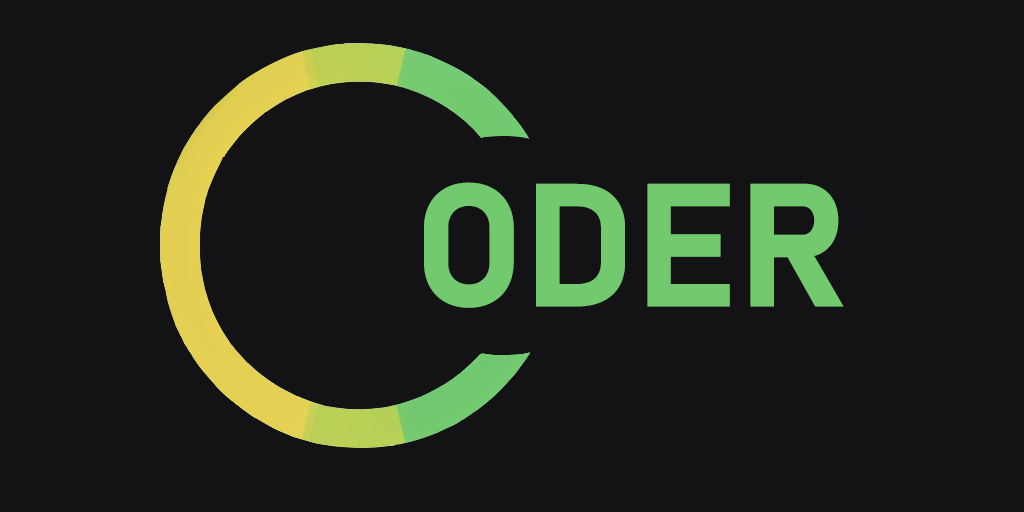
<style>
.page{position:relative;width:1024px;height:512px;background:#131316}
.page>*{position:absolute;margin:0}
.t1{font:172.4px "Bahnschrift-Bold";color:#73c96e}
</style>
<div class="page">
<p class="t1" style="left:424px;top:182px;width:420px;height:126px">ODER</p>
</div>
